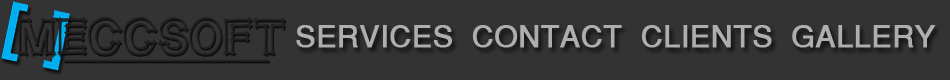
<style>
.page{position:relative;width:950px;height:80px;background:#333333}
.page>*{position:absolute;margin:0}
.t1{font:30px "HelveticaNormal";color:#aeaeae;font-weight:bold}
</style>
<div class="page">
<p class="t1" style="left:296px;top:25px;width:640px;height:23px">SERVICES  CONTACT  CLIENTS  GALLERY</p>
</div>
